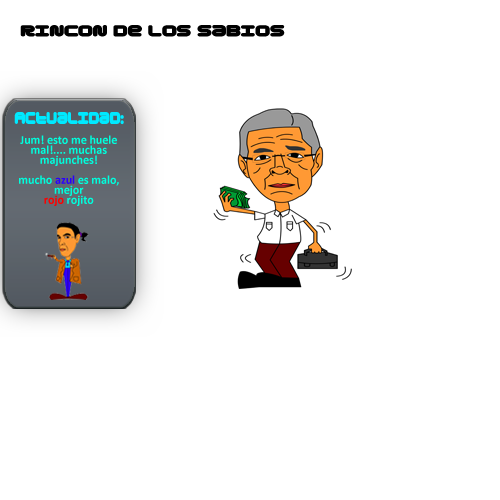
<style>
.page{position:relative;width:500px;height:500px;background:#ffffff}
.page>*{position:absolute;margin:0}
.t1{font:16.3px "Gota";color:#000000;scale:1.22 1}
.t2{font:17.3px "Gota";color:#00eaff;scale:0.85 1}
.t3{font:12px/10px "Calibri-Bold";color:#00ffde}
.t4{font:12px/10px "Calibri-Bold";color:#2a00ff}
.t5{font:12px/10px "Calibri-Bold";color:#ff0000}
</style>
<div class="page">
<p class="t1" style="left:20px;top:25px;width:265px;height:12px">Rincon de los sabios</p>
<p class="t2" style="left:14px;top:111px;width:110px;height:14px">Actualidad:</p>
<p class="t3" style="left:19px;top:135px;width:100px;height:71px;text-align:center">Jum! esto me huele mal!.... muchas majunches!<br><br>mucho <span class="t4">azul</span> es malo, mejor<br><span class="t5">rojo</span> rojito</p>
</div>
